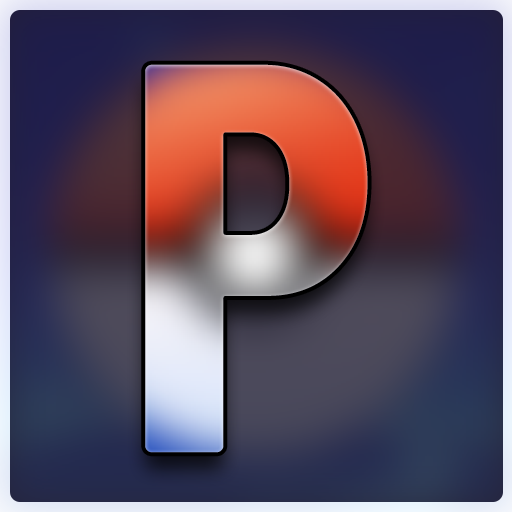
<style>
.page{position:relative;width:512px;height:512px}
.page>*{position:absolute;margin:0}
.t1{font:552.4px "BarlowCondensed-Bold"}
</style>
<div class="page">
<p class="t1" style="left:145px;top:64px;width:223px;height:389px">P</p>
</div>
